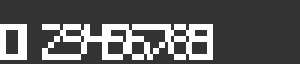
<style>
.page{position:relative;width:300px;height:64px;background:#333333}
.page>*{position:absolute;margin:0}
.t1{font:30px "Pixeled";color:#ffffff}
</style>
<div class="page">
<p class="t1" style="left:0px;top:24px;width:24px;height:36px">0</p>
<p class="t1" style="left:42px;top:24px;width:24px;height:36px">2</p>
<p class="t1" style="left:63px;top:24px;width:24px;height:36px">3</p>
<p class="t1" style="left:84px;top:24px;width:24px;height:36px">4</p>
<p class="t1" style="left:105px;top:24px;width:24px;height:36px">5</p>
<p class="t1" style="left:126px;top:24px;width:24px;height:36px">6</p>
<p class="t1" style="left:147px;top:24px;width:24px;height:36px">7</p>
<p class="t1" style="left:168px;top:24px;width:24px;height:36px">8</p>
<p class="t1" style="left:189px;top:24px;width:24px;height:36px">9</p>
</div>
